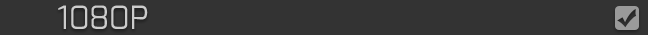
<style>
.page{position:relative;width:648px;height:35px;background:#333333}
.page>*{position:absolute;margin:0}
.t1{font:32px "Exo-Regular";color:#cccccc;text-transform:uppercase}
</style>
<div class="page">
<p class="t1" style="left:58px;top:5px;width:90px;height:24px">1080p</p>
</div>
